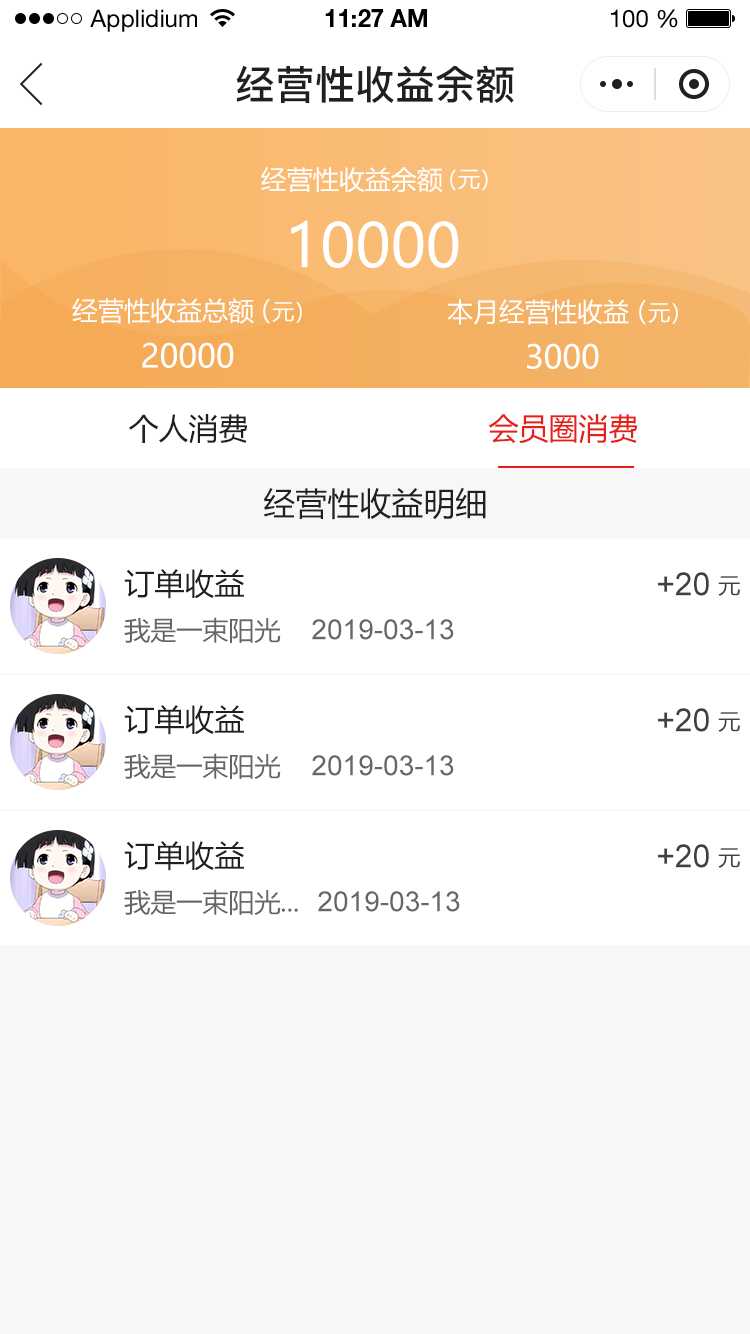
<style>
.page{position:relative;width:750px;height:1334px;background:#ffffff}
.page>*{position:absolute;margin:0}
.t1{font:24px "HelveticaNeueLTStd-Roman";color:#000000}
.t2{font:24px "HelveticaNeueLTStd-Bd";color:#000000}
.t3{font:40px "PingFang-SC-Bold";color:#202020;text-transform:uppercase}
.t4{font:26px "MicrosoftYaHei";color:#ffffff;text-transform:uppercase}
.t5{font:22px "MicrosoftYaHei";color:#ffffff;text-transform:uppercase}
.t6{font:60px "MicrosoftYaHei";color:#ffffff;text-transform:uppercase}
.t7{font:32px "MicrosoftYaHei";color:#ffffff;text-transform:uppercase}
.t8{font:30px "MicrosoftYaHei";color:#202020;text-transform:uppercase}
.t9{font:30px "MicrosoftYaHei";color:#e61f18;text-transform:uppercase}
.t10{font:32px "MicrosoftYaHei";color:#202020;text-transform:uppercase}
.t11{font:32px "ArialMT";color:#404040;text-transform:uppercase}
.t12{font:22px "MicrosoftYaHei";color:#404040;text-transform:uppercase}
.t13{font:26px "MicrosoftYaHei";color:#666666;text-transform:uppercase}
.t14{font:28px "ArialMT";color:#666666;text-transform:uppercase}
</style>
<div class="page">
<p class="t1" style="left:90px;top:9px;width:107px;height:23px">Applidium</p>
<p class="t2" style="left:325px;top:9px;width:102px;height:18px">11:27 AM</p>
<p class="t1" style="left:611px;top:9px;width:67px;height:19px">100 %</p>
<p class="t3" style="left:236px;top:65px;width:278px;height:38px">经营性收益余额</p>
<p class="t4" style="left:261px;top:167px;width:182px;height:26px">经营性收益余额</p>
<p class="t5" style="left:450px;top:169px;width:38px;height:22px">（元）</p>
<p class="t6" style="left:291px;top:220px;width:168px;height:48px">10000</p>
<p class="t4" style="left:72px;top:298px;width:182px;height:26px">经营性收益总额</p>
<p class="t5" style="left:263px;top:299px;width:39px;height:25px"><span class="t4">（</span>元）</p>
<p class="t4" style="left:447px;top:299px;width:182px;height:26px">本月经营性收益</p>
<p class="t5" style="left:639px;top:300px;width:39px;height:25px"><span class="t4">（</span>元）</p>
<p class="t7" style="left:142px;top:342px;width:92px;height:26px">20000</p>
<p class="t7" style="left:527px;top:343px;width:72px;height:26px">3000</p>
<p class="t8" style="left:129px;top:414px;width:118px;height:29px">个人消费</p>
<p class="t9" style="left:488px;top:414px;width:149px;height:30px">会员圈消费</p>
<p class="t10" style="left:264px;top:487px;width:222px;height:33px">经营性收益明细</p>
<p class="t8" style="left:124px;top:569px;width:120px;height:30px">订单收益</p>
<p class="t11" style="left:658px;top:572px;width:51px;height:24px">+20</p>
<p class="t12" style="left:718px;top:576px;width:22px;height:20px">元</p>
<p class="t13" style="left:124px;top:617px;width:157px;height:26px">我是一束阳光</p>
<p class="t14" style="left:312px;top:619px;width:142px;height:21px">2019-03-13</p>
<p class="t8" style="left:124px;top:705px;width:120px;height:30px">订单收益</p>
<p class="t11" style="left:658px;top:708px;width:51px;height:24px">+20</p>
<p class="t12" style="left:718px;top:712px;width:22px;height:20px">元</p>
<p class="t13" style="left:124px;top:753px;width:157px;height:26px">我是一束阳光</p>
<p class="t14" style="left:312px;top:755px;width:142px;height:21px">2019-03-13</p>
<p class="t8" style="left:124px;top:841px;width:120px;height:30px">订单收益</p>
<p class="t11" style="left:658px;top:844px;width:51px;height:24px">+20</p>
<p class="t12" style="left:718px;top:848px;width:22px;height:20px">元</p>
<p class="t13" style="left:124px;top:889px;width:174px;height:26px">我是一束阳光...</p>
<p class="t14" style="left:318px;top:891px;width:142px;height:21px">2019-03-13</p>
</div>
